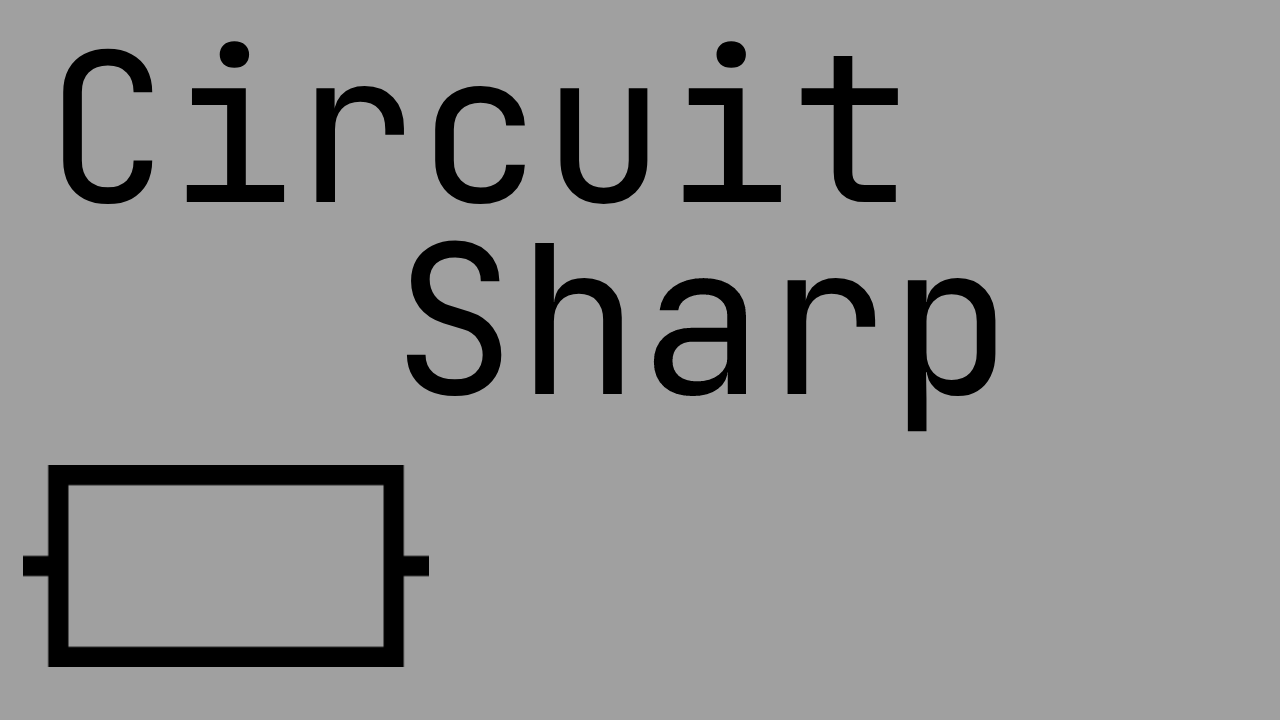
<style>
.page{position:relative;width:1280px;height:720px;background:#a0a0a0}
.page>*{position:absolute;margin:0}
.t1{font:207px "JetBrainsMono-Regular";color:#000000}
</style>
<div class="page">
<p class="t1" style="left:63px;top:41px;width:835px;height:163px">Circuit</p>
<p class="t1" style="left:406px;top:240px;width:590px;height:192px">Sharp</p>
</div>
